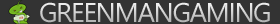
<style>
.page{position:relative;width:280px;height:24px;background:#333333}
.page>*{position:absolute;margin:0}
.t1{font:27px "SegoeUI";letter-spacing:-0.05em}
</style>
<div class="page">
<p class="t1" style="left:40px;top:2px;width:230px;height:21px">GREENMANGAMING</p>
</div>
